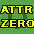
<style>
.page{position:relative;width:34px;height:34px;background:#55a646}
.page>*{position:absolute;margin:0}
.t1{font:11.3px "Gautami";letter-spacing:-0.005em;color:#f6ff00;text-transform:uppercase;font-weight:bold}
</style>
<div class="page">
<p class="t1" style="left:1px;top:6px;width:33px;height:21px">ATTR<br>ZERO</p>
</div>
